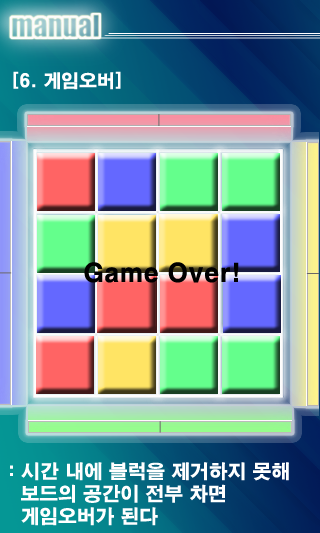
<style>
.page{position:relative;width:320px;height:533px}
.page>*{position:absolute;margin:0}
.t1{font:17.9px "H2gtrE";color:#ffffff}
.t2{font:25px "H2gtrE";color:#000000}
.t3{font:18.8px "H2gtrE";color:#ffffff}
</style>
<div class="page">
<p class="t1" style="left:13px;top:71px;width:108px;height:19px">[6. 게임오버]</p>
<p class="t2" style="left:84px;top:262px;width:155px;height:21px">Game Over!</p>
<p class="t3" style="left:10px;top:462px;width:279px;height:64px">: 시간 내에 블럭을 제거하지 못해<br>  보드의 공간이 전부 차면 <br>  게임오버가 된다</p>
</div>
